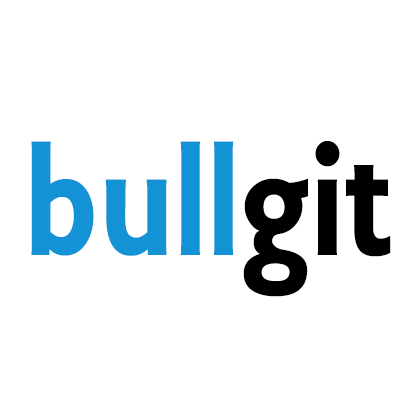
<style>
.page{position:relative;width:420px;height:420px;background:#ffffff}
.page>*{position:absolute;margin:0}
.t1{font:170px "Collegiate";color:#1393d5}
.t2{font:170px "Collegiate";color:#000000}
</style>
<div class="page">
<p class="t1" style="left:31px;top:141px;width:360px;height:156px">bull<span class="t2">git</span></p>
</div>
